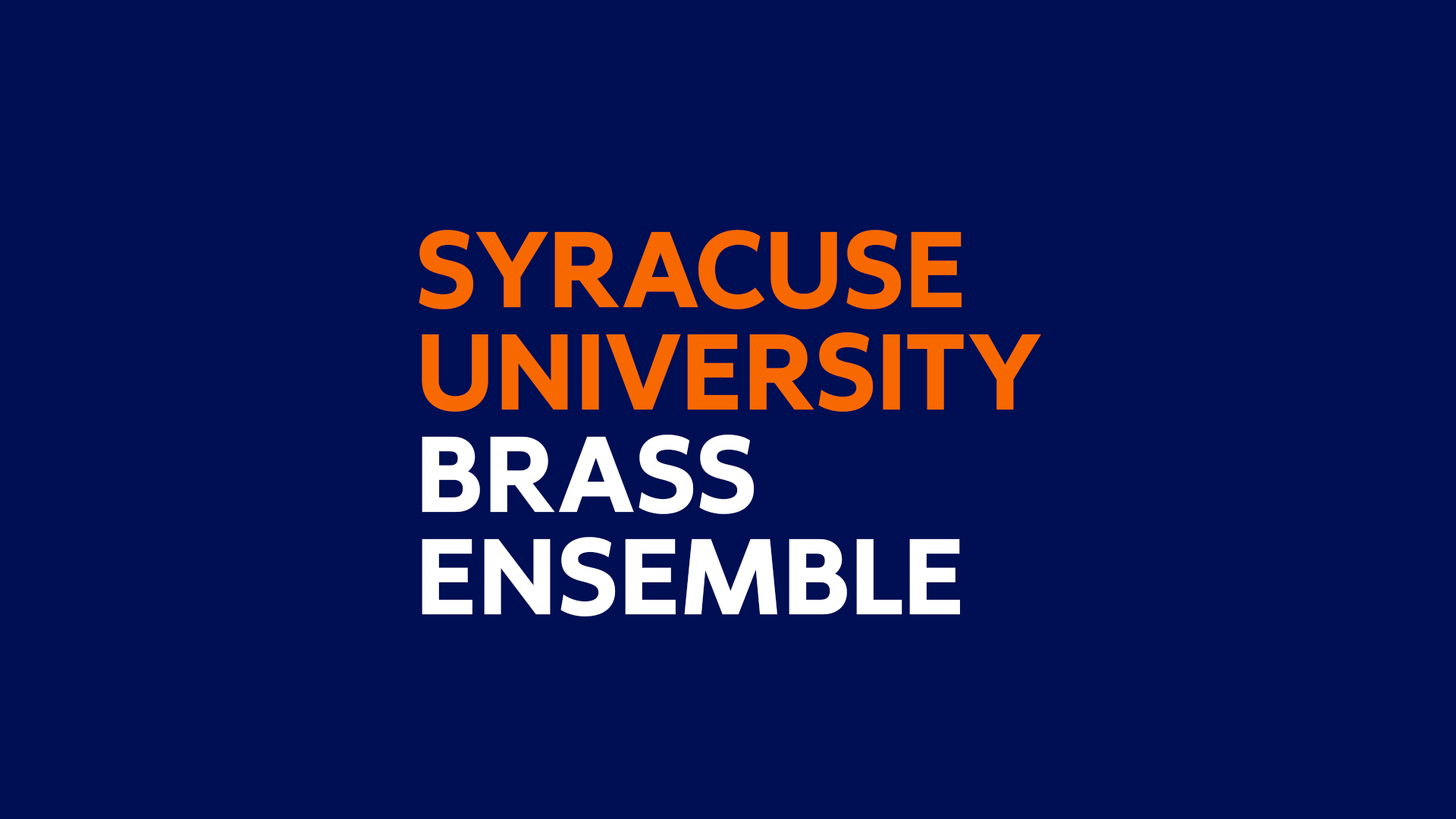
<style>
.page{position:relative;width:1456px;height:819px;background:#000e54}
.page>*{position:absolute;margin:0}
.t1{font:113.7px/102.4px "ShermanSans-Bold";letter-spacing:0.01em;color:#f76900;text-transform:uppercase}
.t2{font:113.7px/102.4px "ShermanSans-Bold";letter-spacing:0.01em;color:#ffffff;text-transform:uppercase}
</style>
<div class="page">
<p class="t1" style="left:419px;top:230px;width:622px;height:387px">Syracuse <br>University<br><span class="t2">Brass <br>Ensemble</span></p>
</div>
